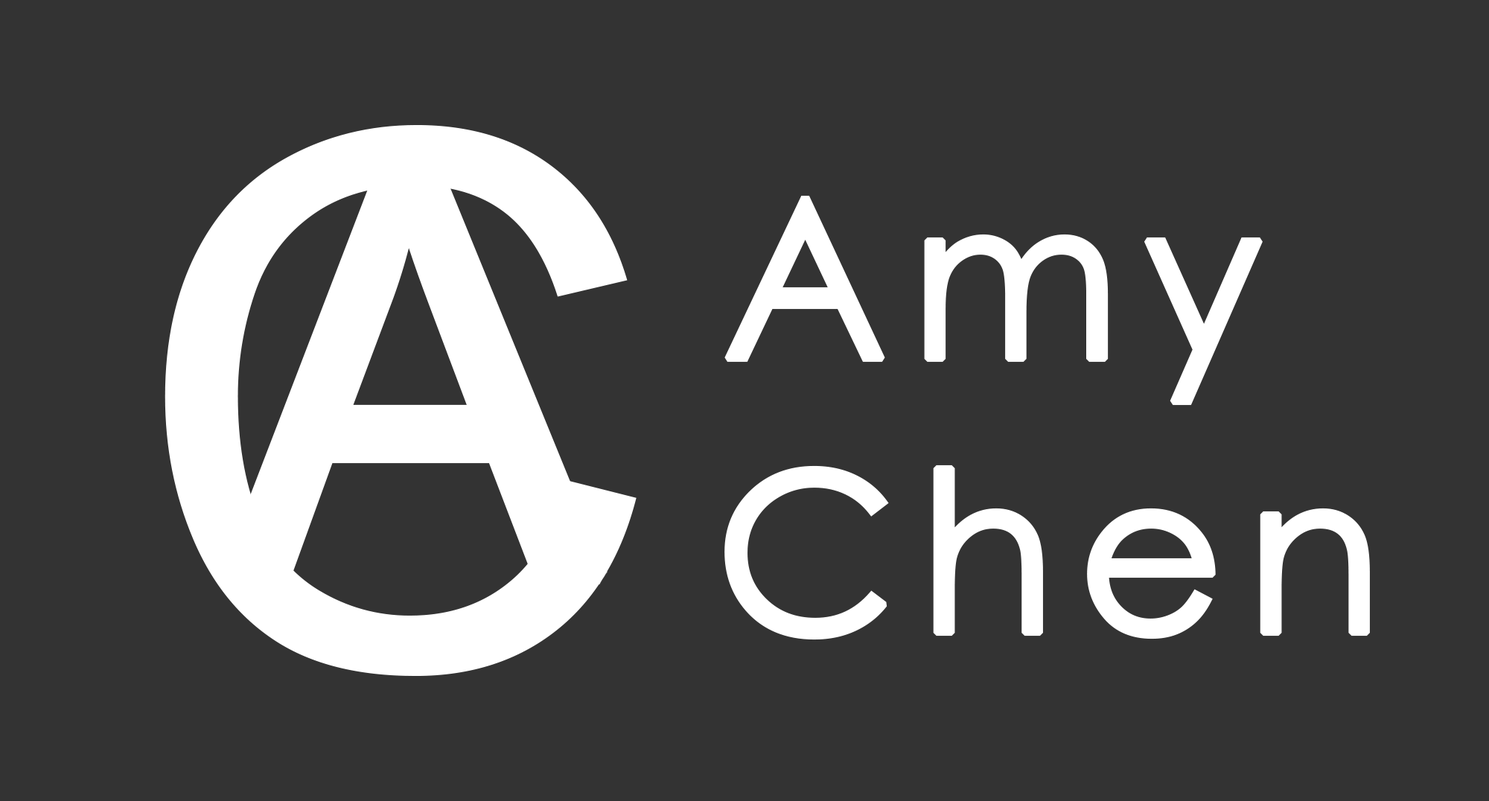
<style>
.page{position:relative;width:1489px;height:801px;background:#333333}
.page>*{position:absolute;margin:0}
.t1{font:744.4px "ArialMT";letter-spacing:0.075em;color:#ffffff}
.t2{font:558.3px "ArialMT";letter-spacing:0.075em;color:#ffffff;font-weight:bold}
.t3{font:223.3px "CenturyGothic";letter-spacing:0.075em;color:#ffffff;font-weight:bold}
</style>
<div class="page">
<p class="t1" style="left:165px;top:125px;width:471px;height:551px">C</p>
<p class="t2" style="left:220px;top:169px;width:388px;height:416px">A</p>
<p class="t3" style="left:724px;top:195px;width:538px;height:211px">Amy</p>
<p class="t3" style="left:724px;top:464px;width:646px;height:176px">Chen</p>
</div>
